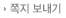
<style>
.page{position:relative;width:66px;height:18px;background:#ffffff}
.page>*{position:absolute;margin:0}
.t1{font:11.6px "YDIYGO330";letter-spacing:-0.03em;color:#828282;scale:0.92 1}
</style>
<div class="page">
<p class="t1" style="left:10px;top:3px;width:51px;height:11px">쪽지 보내기</p>
</div>
